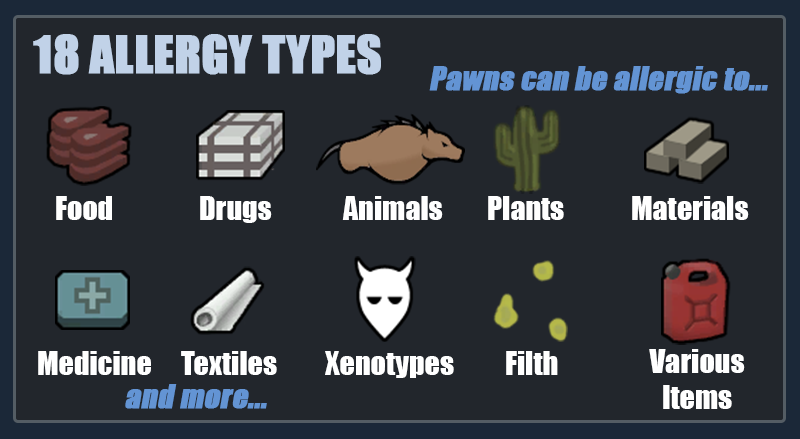
<style>
.page{position:relative;width:800px;height:439px;background:#22262c}
.page>*{position:absolute;margin:0}
.t1{font:47.5px "Impact";color:#c1d2e8;text-transform:uppercase;font-weight:bold}
.t2{font:30px "Impact";color:#6394d4;font-weight:bold;font-style:italic}
.t3{font:30px "Impact";color:#ffffff}
</style>
<div class="page">
<p class="t1" style="left:33px;top:34px;width:348px;height:41px">18 Allergy Types</p>
<p class="t2" style="left:429px;top:66px;width:339px;height:28px">Pawns can be allergic to...</p>
<p class="t3" style="left:56px;top:196px;width:693px;height:27px">Food   Drugs  Animals  Plants  Materials</p>
<p class="t3" style="left:38px;top:351px;width:520px;height:27px">Medicine Textiles  Xenotypes  Filth</p>
<p class="t3" style="left:649px;top:349px;width:96px;height:60px;text-align:center">Various<br>Items</p>
<p class="t2" style="left:125px;top:384px;width:142px;height:25px">and more...</p>
</div>
